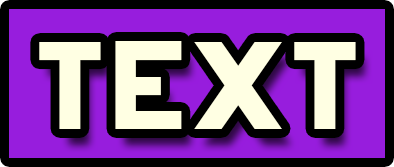
<style>
.page{position:relative;width:394px;height:167px;background:#971ddd}
.page>*{position:absolute;margin:0}
.t1{font:200px "ONRAMP";color:#ffffe3}
</style>
<div class="page">
<p class="t1" style="left:39px;top:41px;width:317px;height:88px">TEXT</p>
</div>
